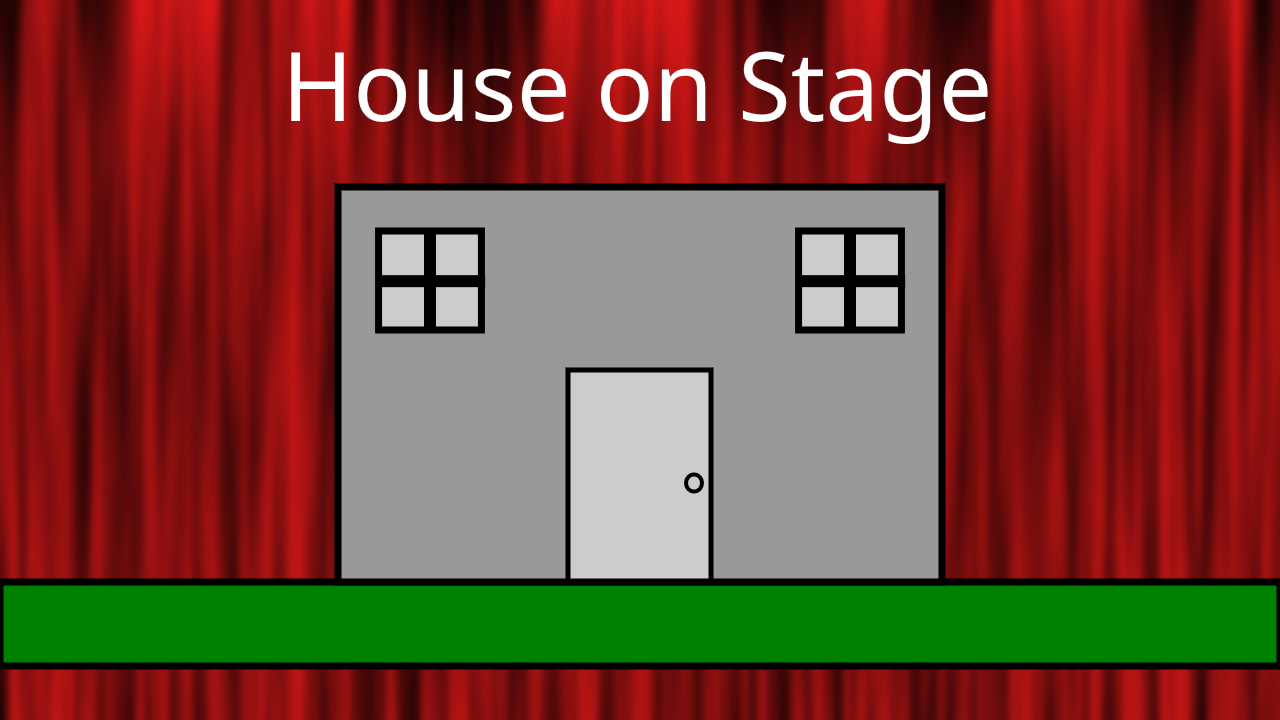
<style>
.page{position:relative;width:1280px;height:720px}
.page>*{position:absolute;margin:0}
.t1{font:96px "NotoSansGeorgian-Regular";color:#ffffff}
</style>
<div class="page">
<p class="t1" style="left:291px;top:51px;width:697px;height:94px">House on Stage</p>
</div>
